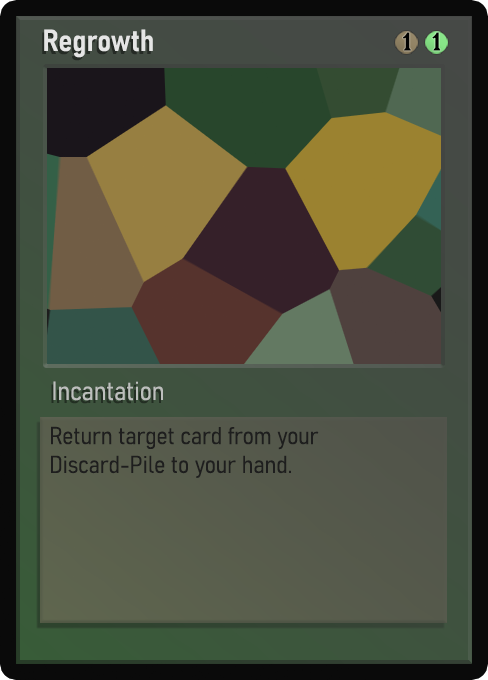
<style>
.page{position:relative;width:488px;height:680px}
.page>*{position:absolute;margin:0}
.t1{font:30px "Bahnschrift-SemiBoldSemiCondensed";color:#f2f2f2;font-weight:bold}
.t2{font:25px "WTRRoycroft";color:#000000;font-weight:bold;scale:1.09 1}
.t3{font:26px "Bahnschrift-LightSemiCondensed";color:#c8c8c8;font-weight:bold}
.t4{font:24px "Bahnschrift-LightSemiCondensed";color:#1e1e1e;font-weight:bold}
</style>
<div class="page">
<p class="t1" style="left:44px;top:29px;width:109px;height:29px;opacity:0.9">Regrowth</p>
<p class="t2" style="left:403px;top:32px;width:8px;height:19px">1</p>
<p class="t2" style="left:432px;top:32px;width:9px;height:19px">1</p>
<p class="t3" style="left:53px;top:381px;width:110px;height:20px;opacity:0.9">Incantation</p>
<p class="t4" style="left:51px;top:426px;width:268px;height:52px">Return target card from your Discard-Pile to your hand.</p>
</div>
